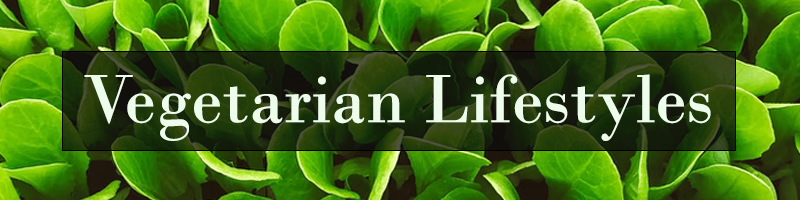
<style>
.page{position:relative;width:800px;height:200px}
.page>*{position:absolute;margin:0}
.t1{font:72px "BodoniMT";color:#edfceb}
</style>
<div class="page">
<p class="t1" style="left:84px;top:74px;width:627px;height:67px">Vegetarian Lifestyles</p>
</div>
